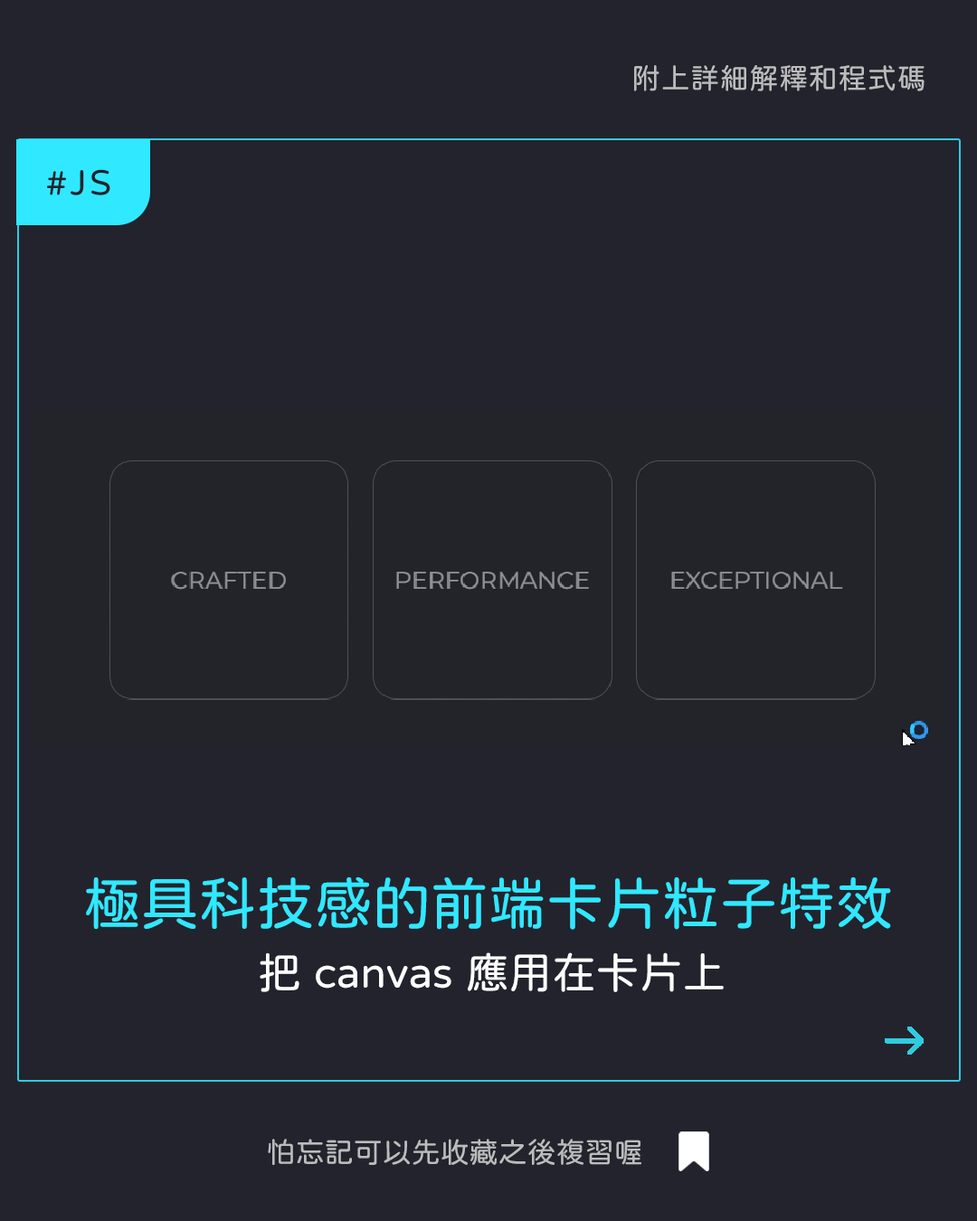
<style>
.page{position:relative;width:977px;height:1221px;background:#23232d}
.page>*{position:absolute;margin:0}
.t1{font:28.9px "jf-openhuninn-1.1";letter-spacing:0.02em;color:#bcbcbd}
.t2{font:36.2px "jf-openhuninn-1.1";letter-spacing:0.08em;color:#24232d}
.t3{font:57.9px "jf-openhuninn-1.1";color:#30e8ff}
.t4{font:43.4px "jf-openhuninn-1.1";color:#fefefe}
.t5{font:28.9px "jf-openhuninn-1.1";color:#bcbcbd}
</style>
<div class="page">
<p class="t1" style="left:634px;top:65px;width:290px;height:26px">附上詳細解釋和程式碼</p>
<p class="t2" style="left:46px;top:169px;width:64px;height:26px">#JS</p>
<p class="t3" style="left:86px;top:876px;width:805px;height:54px">極具科技感的前端卡片粒子特效</p>
<p class="t4" style="left:260px;top:952px;width:463px;height:40px">把 canvas 應用在卡片上</p>
<p class="t5" style="left:268px;top:1139px;width:373px;height:26px">怕忘記可以先收藏之後複習喔</p>
</div>
